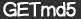
<style>
.page{position:relative;width:81px;height:19px}
.page>*{position:absolute;margin:0}
.t1{font:19.1px "YuppySC-Regular";letter-spacing:-0.04em;color:#ffffff;font-weight:bold}
</style>
<div class="page">
<p class="t1" style="left:3px;top:1px;width:73px;height:16px">GETmd5</p>
</div>
